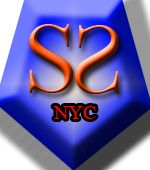
<style>
.page{position:relative;width:150px;height:170px}
.page>*{position:absolute;margin:0}
.t1{font:100px "IskoolaPota"}
.t2{font:20px "IskoolaPota";color:#ff0000}
</style>
<div class="page">
<p class="t1" style="left:29px;top:24px;width:45px;height:69px">S</p>
<p class="t1" style="left:74px;top:25px;width:45px;height:69px;rotate:180deg">S</p>
<p class="t2" style="left:53px;top:106px;width:43px;height:13px">NYC</p>
</div>
